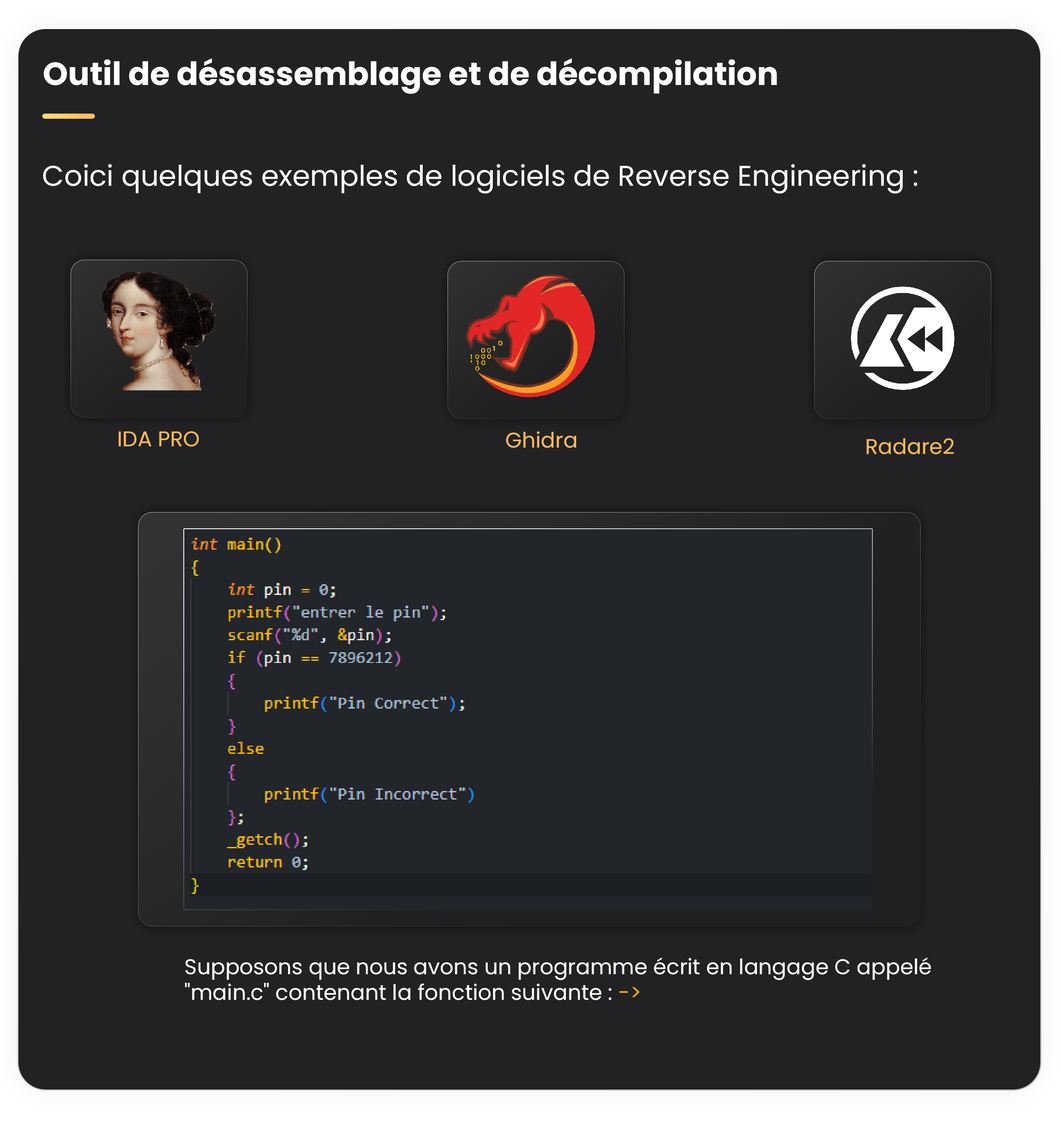
<style>
.page{position:relative;width:1060px;height:1125px;background:#222224}
.page>*{position:absolute;margin:0}
.t1{font:32px "Poppins-Bold";color:#ffffff}
.t2{font:28.5px "Poppins-Regular";color:#ffffff}
.t3{font:21.4px "Poppins-Regular";color:#feba5c}
.t4{font:21.4px "Poppins-Regular";color:#ffffff}
.t5{font:21.4px "Poppins-Regular";color:#eeac11}
</style>
<div class="page">
<p class="t1" style="left:44px;top:58px;width:733px;height:36px">Outil de désassemblage et de décompilation</p>
<p class="t2" style="left:43px;top:164px;width:874px;height:30px">Coici quelques exemples de logiciels de Reverse Engineering :</p>
<p class="t3" style="left:118px;top:431px;width:81px;height:16px">IDA PRO</p>
<p class="t3" style="left:506px;top:432px;width:70px;height:16px">Ghidra</p>
<p class="t3" style="left:866px;top:438px;width:88px;height:17px">Radare2</p>
<p class="t4" style="left:185px;top:958px;width:746px;height:43px">Supposons que nous avons un programme écrit en langage C appelé "main.c" contenant la fonction suivante : <span class="t5">-&gt;</span></p>
</div>
